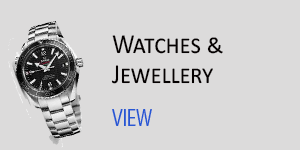
<style>
.page{position:relative;width:300px;height:150px;background:#dcdbdb}
.page>*{position:absolute;margin:0}
.t1{font:27.8px/30px "Calibri";letter-spacing:-0.01em;color:#050101;font-variant:small-caps;scale:0.92 1}
.t2{font:24px "MyriadPro-Regular";letter-spacing:-0.01em;color:#2657d4;text-transform:uppercase;scale:0.8 1}
</style>
<div class="page">
<p class="t1" style="left:111px;top:35px;width:112px;height:49px">Watches &amp;<br>Jewellery</p>
<p class="t2" style="left:112px;top:109px;width:40px;height:17px">View</p>
</div>
